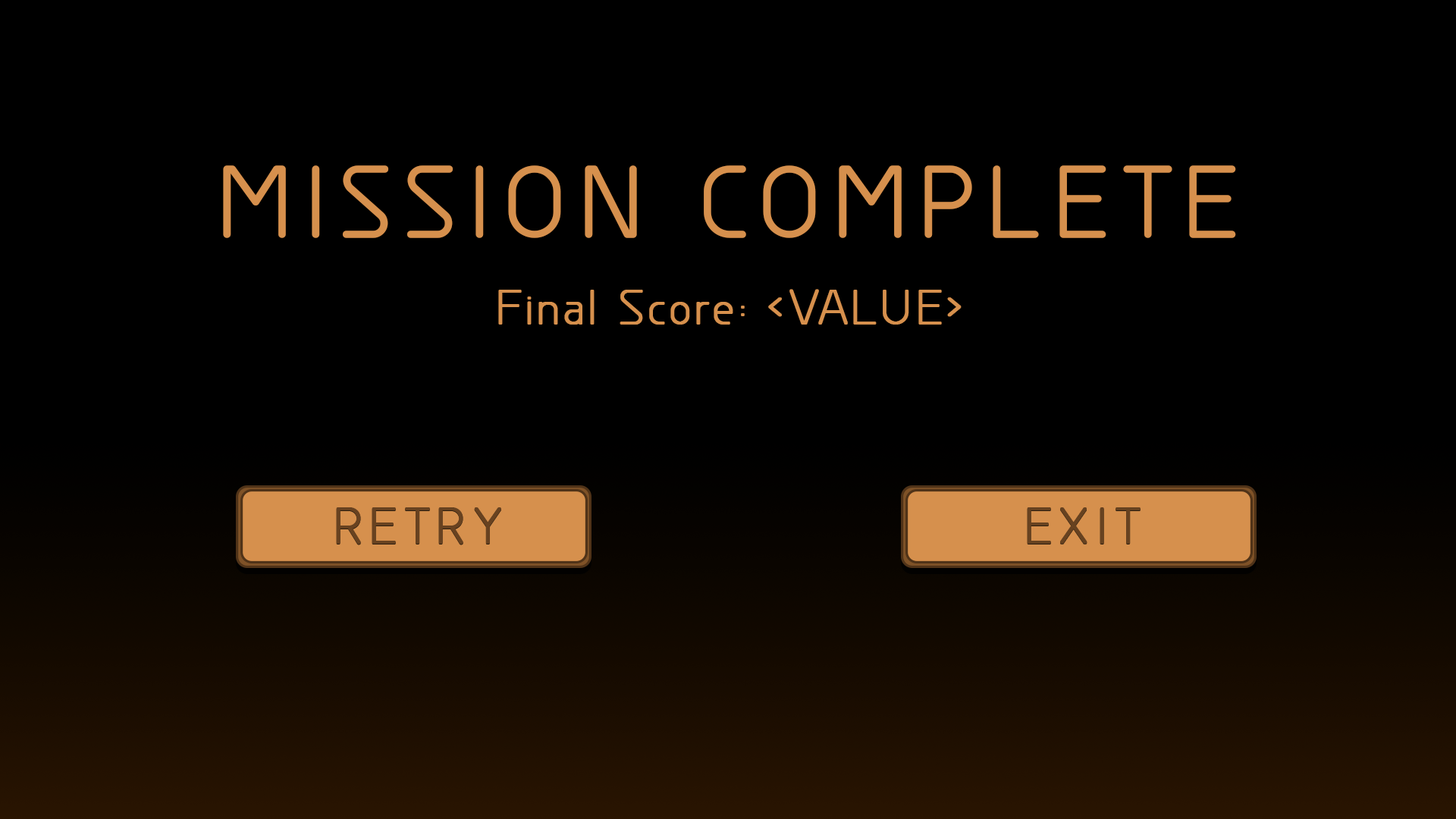
<style>
.page{position:relative;width:1456px;height:819px;background:#000000}
.page>*{position:absolute;margin:0}
.t1{font:91.8px "GreyscaleBasic";letter-spacing:0.15em;color:#d6904d;font-weight:bold}
.t2{font:45.5px "GreyscaleBasic";letter-spacing:0.075em;color:#d6904d;font-weight:bold}
.t3{font:47px "GreyscaleBasic";letter-spacing:0.15em;color:#674220;font-weight:bold}
</style>
<div class="page">
<p class="t1" style="left:223px;top:165px;width:1013px;height:73px">MISSION COMPLETE</p>
<p class="t2" style="left:498px;top:289px;width:464px;height:36px">Final Score: &lt;VALUE&gt;</p>
<p class="t3" style="left:336px;top:507px;width:165px;height:37px">RETRY</p>
<p class="t3" style="left:1027px;top:507px;width:114px;height:37px">EXIT</p>
</div>
